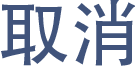
<style>
.page{position:relative;width:135px;height:66px;background:#ffffff}
.page>*{position:absolute;margin:0}
.t1{font:72px "AdobeHeitiStd-Regular";color:#40537b}
</style>
<div class="page">
<p class="t1" style="left:1px;top:0px;width:135px;height:66px">取消</p>
</div>
